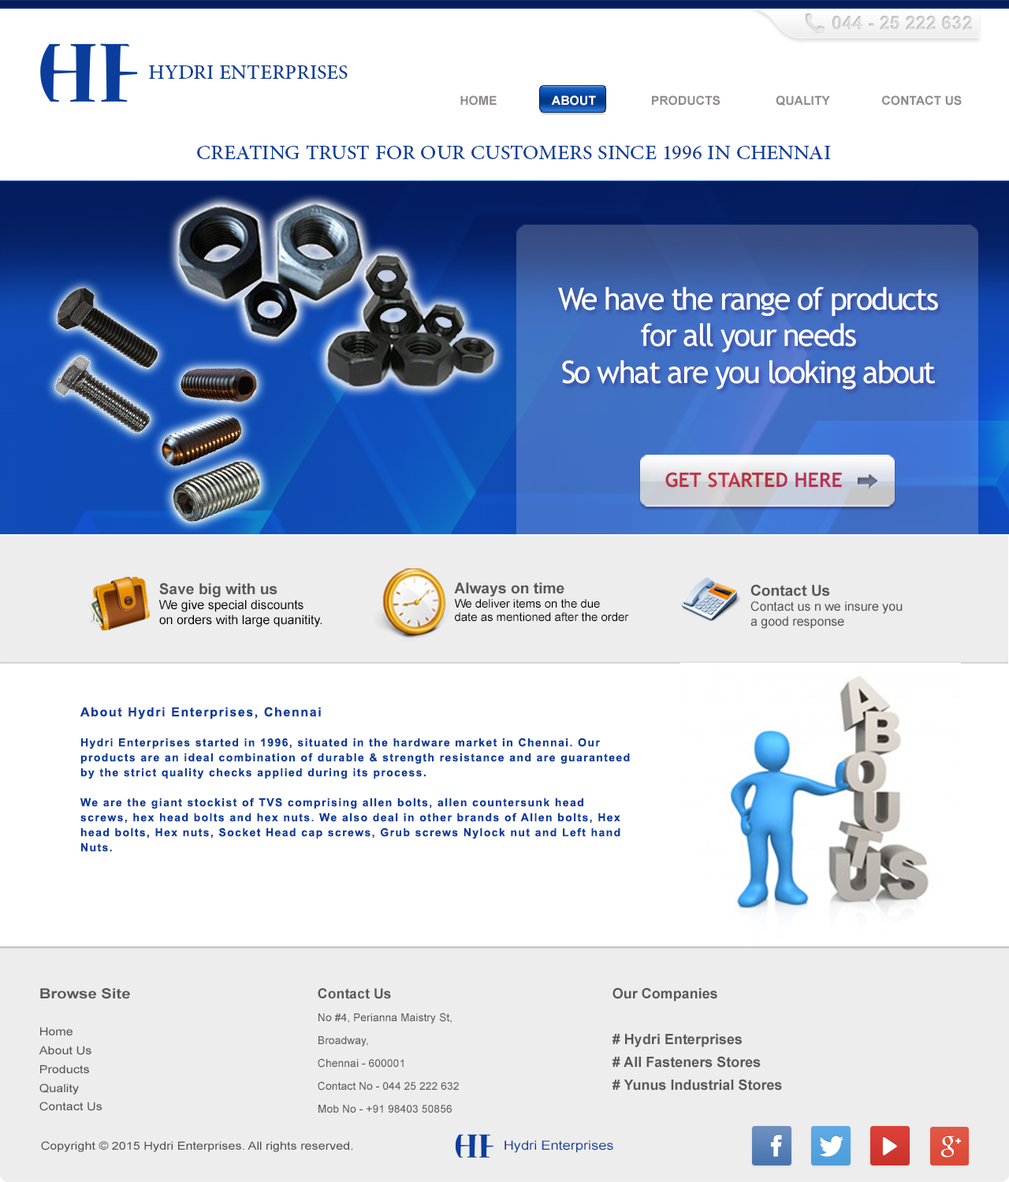
<style>
.page{position:relative;width:1009px;height:1182px;background:#ffffff}
.page>*{position:absolute;margin:0}
.t1{font:18.7px "Arial-BoldMT";color:#c0c0c0;text-transform:uppercase}
.t2{font:28.3px "AdobeArabic-Regular";color:#0c3e9c;text-transform:uppercase}
.t3{font:12.5px "Arial-BoldMT";color:#8d8a8a;text-transform:uppercase}
.t4{font:12.5px "Arial-BoldMT";color:#ffffff;text-transform:uppercase}
.t5{font:28.4px "AdobeArabic-Regular";color:#0c3e9c;text-transform:uppercase}
.t6{font:30.8px "TrebuchetMS";letter-spacing:-0.05em;color:#ffffff}
.t7{font:20px "TrebuchetMS-Bold";color:#b53343;text-transform:uppercase}
.t8{font:12.6px "ArialMT";color:#000000}
.t9{font:15.1px "Arial-BoldMT";color:#575757}
.t10{font:11.8px "ArialMT";color:#000000}
.t11{font:12.6px "ArialMT";color:#4f4f4f}
.t12{font:11px/15px "Arial-BoldMT";letter-spacing:0.1em;color:#0b3d9c}
.t13{font:12.6px/15px "Arial-BoldMT";letter-spacing:0.1em;color:#0b3d9c}
.t14{font:11.2px/18.7px "ArialMT";color:#4f4f4f;scale:1.14 1}
.t15{font:14px/18.7px "Arial-BoldMT";color:#585858;scale:1.14 1}
.t16{font:11px/22.9px "ArialMT";color:#585858}
.t17{font:14px/22.9px "Arial-BoldMT";color:#585858}
.t18{font:14.2px/22.9px "Arial-BoldMT";color:#585858}
.t19{font:11.2px "ArialMT";color:#4f4f4f;scale:1.14 1}
.t20{font:12.6px "ArialMT";color:#0c3e9c;scale:1.14 1}
</style>
<div class="page">
<p class="t1" style="left:832px;top:16px;width:140px;height:14px">044 - 25 222 632</p>
<p class="t2" style="left:148px;top:65px;width:200px;height:14px">Hydri enterprises</p>
<p class="t3" style="left:460px;top:95px;width:501px;height:11px">Home                <span class="t4">About  </span>              Products                Quality               Contact US</p>
<p class="t5" style="left:197px;top:145px;width:634px;height:14px">CREATING tRUST fOR OUR cUSTOMERS SINCE 1996 IN cHENNAI</p>
<p class="t6" style="left:558px;top:287px;width:380px;height:102px;text-align:center">We have the range of products<br>for all your needs<br>So what are you looking about</p>
<p class="t7" style="left:665px;top:472px;width:177px;height:16px">get started here</p>
<p class="t8" style="left:158px;top:583px;width:164px;height:44px"><span class="t9">Save big with us<br></span>We give special discounts<br>on orders with large quanitity.</p>
<p class="t10" style="left:454px;top:582px;width:175px;height:40px"><span class="t9">Always on time<br></span>We deliver items on the due <br>date as mentioned after the order</p>
<p class="t11" style="left:750px;top:585px;width:152px;height:44px"><span class="t9">Contact Us<br></span>Contact us n we insure you<br>a good response</p>
<p class="t12" style="left:80px;top:707px;width:550px;height:145px"><span class="t13">About Hydri Enterprises, Chennai<br></span><br>Hydri Enterprises started in 1996, situated in the hardware market in Chennai. Our products are an ideal combination of durable &amp; strength resistance and are guaranteed by the strict quality checks applied during its process.<br><br>We are the giant stockist of TVS comprising allen bolts, allen countersunk head screws, hex head bolts and hex nuts. We also deal in other brands of Allen bolts, Hex head bolts, Hex nuts, Socket Head cap screws, Grub screws Nylock nut and Left hand Nuts.</p>
<p class="t14" style="left:39px;top:988px;width:91px;height:123px"><span class="t15">Browse Site<br><br></span>Home<br>About Us<br>Products<br>Quality<br>Contact Us</p>
<p class="t16" style="left:318px;top:988px;width:141px;height:125px"><span class="t17">Contact Us<br></span>No #4, Perianna Maistry St,<br>Broadway,<br>Chennai - 600001<br>Contact No - 044 25 222 632<br>Mob No - +91 98403 50856</p>
<p class="t18" style="left:612px;top:987px;width:170px;height:104px">Our Companies<br><br># Hydri Enterprises<br># All Fasteners Stores<br># Yunus Industrial Stores</p>
<p class="t19" style="left:41px;top:1141px;width:312px;height:11px">Copyright © 2015 Hydri Enterprises. All rights reserved.</p>
<p class="t20" style="left:504px;top:1140px;width:109px;height:13px">Hydri Enterprises</p>
</div>
